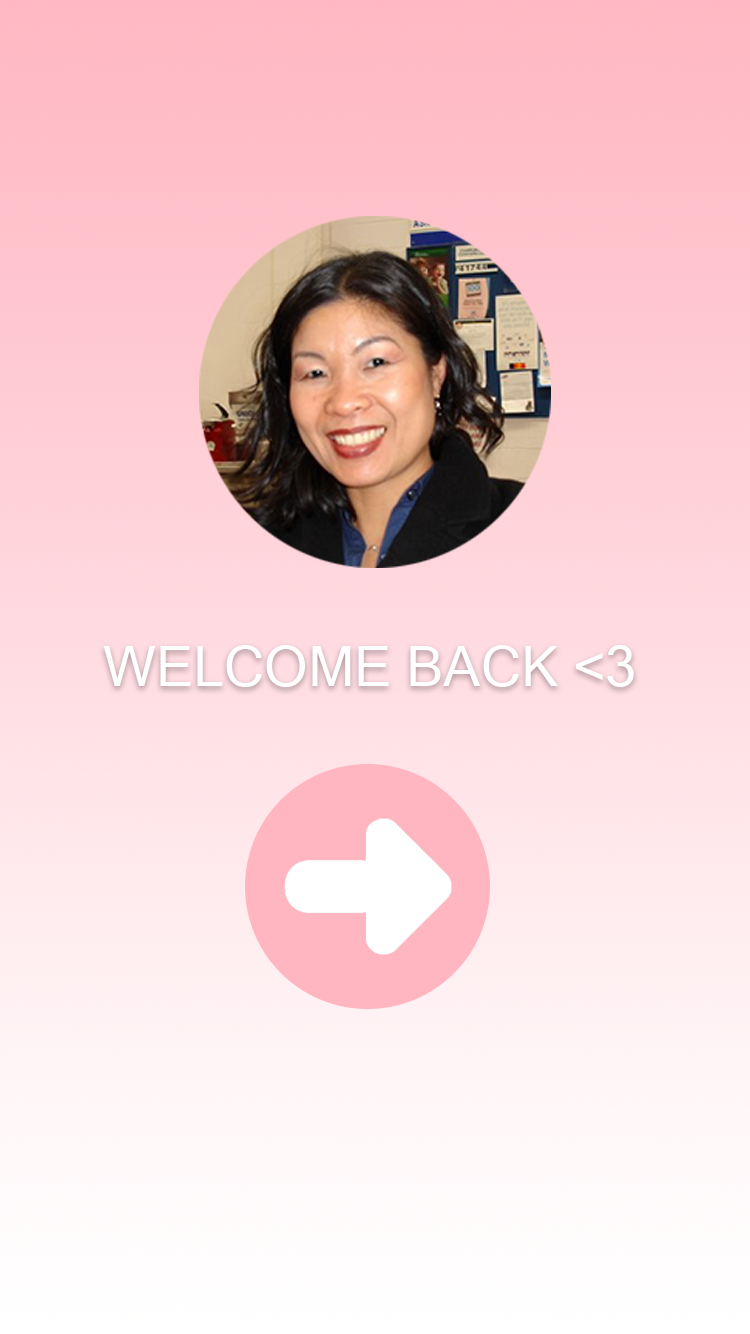
<style>
.page{position:relative;width:750px;height:1334px}
.page>*{position:absolute;margin:0}
.t1{font:55.7px "MicrosoftSansSerif";color:#ffffff}
</style>
<div class="page">
<p class="t1" style="left:103px;top:645px;width:531px;height:42px">WELCOME BACK &lt;3</p>
</div>
